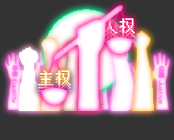
<style>
.page{position:relative;width:174px;height:140px;background:#333333}
.page>*{position:absolute;margin:0}
.t1{font:17.5px "HYPixel-11px-U"}
.t2{font:17.5px "HYPixel-11px-U";color:#ffffff}
</style>
<div class="page">
<p class="t1" style="left:102px;top:22px;width:33px;height:16px">人权</p>
<p class="t2" style="left:102px;top:18px;width:33px;height:16px">人权</p>
<p class="t1" style="left:38px;top:73px;width:33px;height:16px">主权</p>
<p class="t2" style="left:38px;top:70px;width:33px;height:16px">主权</p>
</div>
